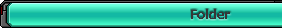
<style>
.page{position:relative;width:282px;height:28px}
.page>*{position:absolute;margin:0}
.t1{font:12px "MeiryoUI-Bold";color:#363636}
</style>
<div class="page">
<p class="t1" style="left:191px;top:9px;width:39px;height:10px">Folder</p>
</div>
